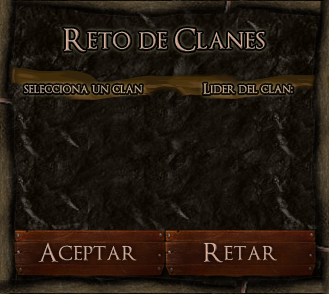
<style>
.page{position:relative;width:329px;height:294px}
.page>*{position:absolute;margin:0}
.t1{font:30px "OptimusPrinceps";color:#d1a58e}
.t2{font:14px "OptimusPrinceps";color:#dbac8f}
.t3{font:14px "OptimusPrinceps";color:#d9a98c}
.t4{font:25.6px "OptimusPrinceps";color:#d8a78f}
.t5{font:25.6px "OptimusPrinceps"}
</style>
<div class="page">
<p class="t1" style="left:63px;top:28px;width:202px;height:24px">Reto de Clanes</p>
<p class="t2" style="left:24px;top:84px;width:119px;height:10px">selecciona un clan</p>
<p class="t3" style="left:203px;top:83px;width:90px;height:12px">Lider del clan:</p>
<p class="t4" style="left:38px;top:242px;width:99px;height:21px">Aceptar</p>
<p class="t5" style="left:203px;top:242px;width:74px;height:21px">Retar</p>
</div>
